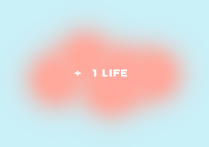
<style>
.page{position:relative;width:209px;height:147px;background:#caf0f8}
.page>*{position:absolute;margin:0}
.t1{font:11.1px "Jersey25-Regular";letter-spacing:0.05em;color:#f9ffff;scale:1.35 1}
</style>
<div class="page">
<p class="t1" style="left:74px;top:69px;width:53px;height:8px">1 LIFE</p>
</div>
